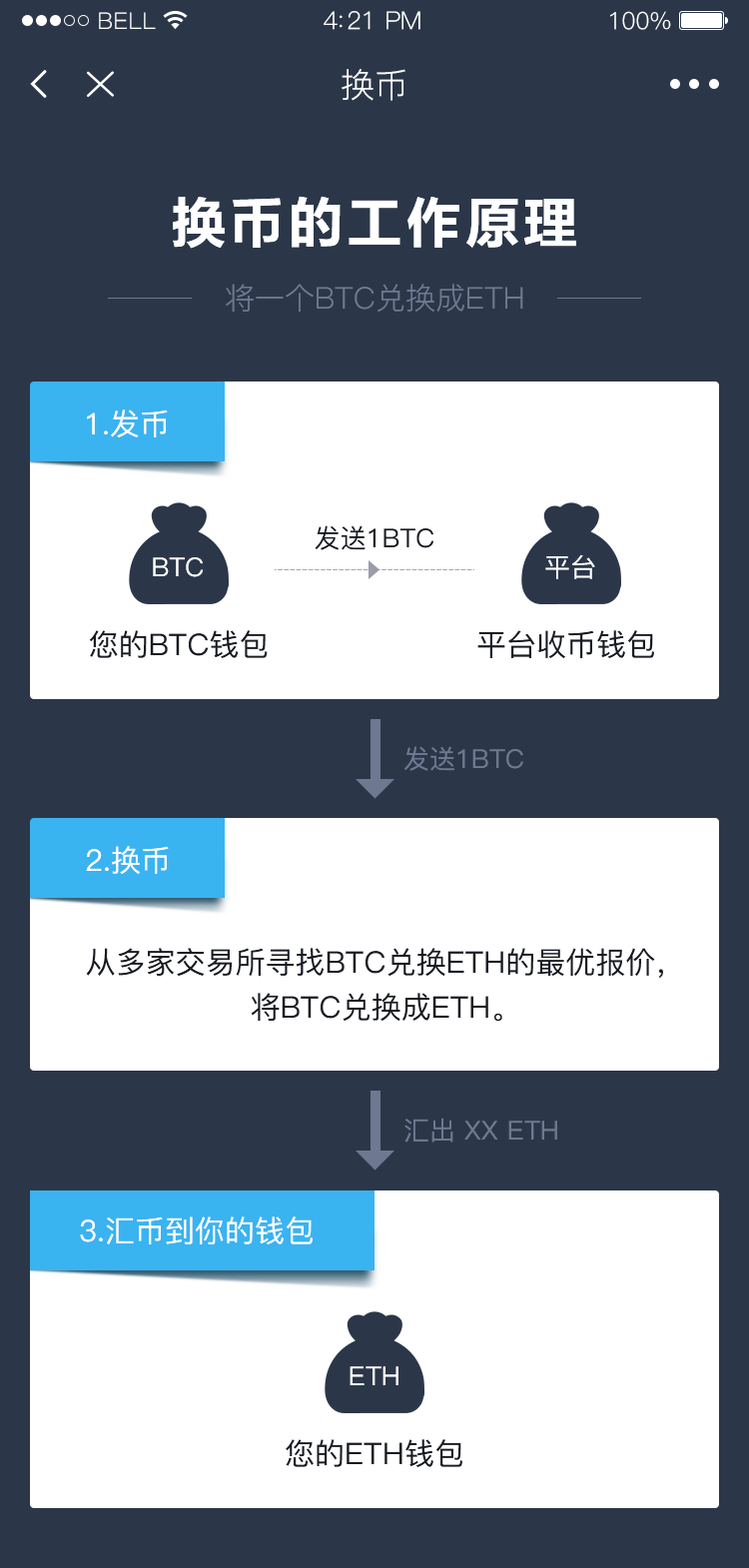
<style>
.page{position:relative;width:749px;height:1568px;background:#ffffff}
.page>*{position:absolute;margin:0}
.t1{font:23px "PingFang-SC-Regular";letter-spacing:0.02em;color:#ffffff}
.t2{font:25px "PingFang-SC-Regular";letter-spacing:-0.02em;color:#ffffff}
.t3{font:24px "PingFang-SC-Regular";letter-spacing:-0.02em;color:#ffffff}
.t4{font:34px "PingFang-SC-Regular";color:#ffffff}
.t5{font:55.9px "FZLTCHJW--GB1-0";letter-spacing:0.05em;color:#ffffff}
.t6{font:30px "PingFang-SC-Regular";color:#6e7991}
.t7{font:30px "PingFang-SC-Medium";color:#ffffff}
.t8{font:26px "PingFang-SC-Medium";color:#181b23}
.t9{font:26px "PingFang-SC-Medium";color:#ffffff}
.t10{font:30px "PingFang-SC-Medium";color:#181b23}
.t11{font:30px "PingFang-SC-Medium";color:#999da7}
.t12{font:26px "PingFang-SC-Medium";color:#6e7991}
.t13{font:30px/44.9px "PingFang-SC-Medium";color:#181b23}
</style>
<div class="page">
<p class="t1" style="left:99px;top:12px;width:57px;height:17px">BELL</p>
<p class="t2" style="left:324px;top:11px;width:96px;height:19px">4:21 PM</p>
<p class="t3" style="left:610px;top:11px;width:61px;height:19px">100%</p>
<p class="t4" style="left:342px;top:69px;width:63px;height:32px">换币</p>
<p class="t5" style="left:173px;top:196px;width:403px;height:53px">换币的工作原理</p>
<p class="t6" style="left:226px;top:284px;width:297px;height:28px">将一个BTC兑换成ETH</p>
<p class="t7" style="left:87px;top:409px;width:81px;height:28px">1.发币</p>
<p class="t8" style="left:315px;top:525px;width:119px;height:25px">发送1BTC</p>
<p class="t9" style="left:153px;top:557px;width:51px;height:20px">BTC</p>
<p class="t9" style="left:545px;top:554px;width:50px;height:25px">平台</p>
<p class="t10" style="left:89px;top:630px;width:179px;height:28px"><span class="t11"> </span>您的BTC钱包</p>
<p class="t10" style="left:477px;top:630px;width:177px;height:28px">平台收币钱包</p>
<p class="t12" style="left:404px;top:746px;width:119px;height:25px">发送1BTC</p>
<p class="t7" style="left:86px;top:846px;width:83px;height:28px">2.换币</p>
<p class="t13" style="left:86px;top:948px;width:577px;height:74px;text-align:center">从多家交易所寻找BTC兑换ETH的最优报价，<br>将BTC兑换成ETH。</p>
<p class="t12" style="left:404px;top:1118px;width:153px;height:25px">汇出 XX ETH</p>
<p class="t7" style="left:80px;top:1216px;width:233px;height:28px">3.汇币到你的钱包</p>
<p class="t9" style="left:350px;top:1366px;width:48px;height:19px">ETH</p>
<p class="t10" style="left:286px;top:1439px;width:176px;height:28px"><span class="t11"> </span>您的ETH钱包</p>
</div>
